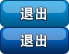
<style>
.page{position:relative;width:69px;height:54px}
.page>*{position:absolute;margin:0}
.t1{font:14px "AdobeHeitiStd-Regular";color:#ffffff}
</style>
<div class="page">
<p class="t1" style="left:20px;top:7px;width:27px;height:13px">退出</p>
<p class="t1" style="left:20px;top:34px;width:27px;height:13px">退出</p>
</div>
